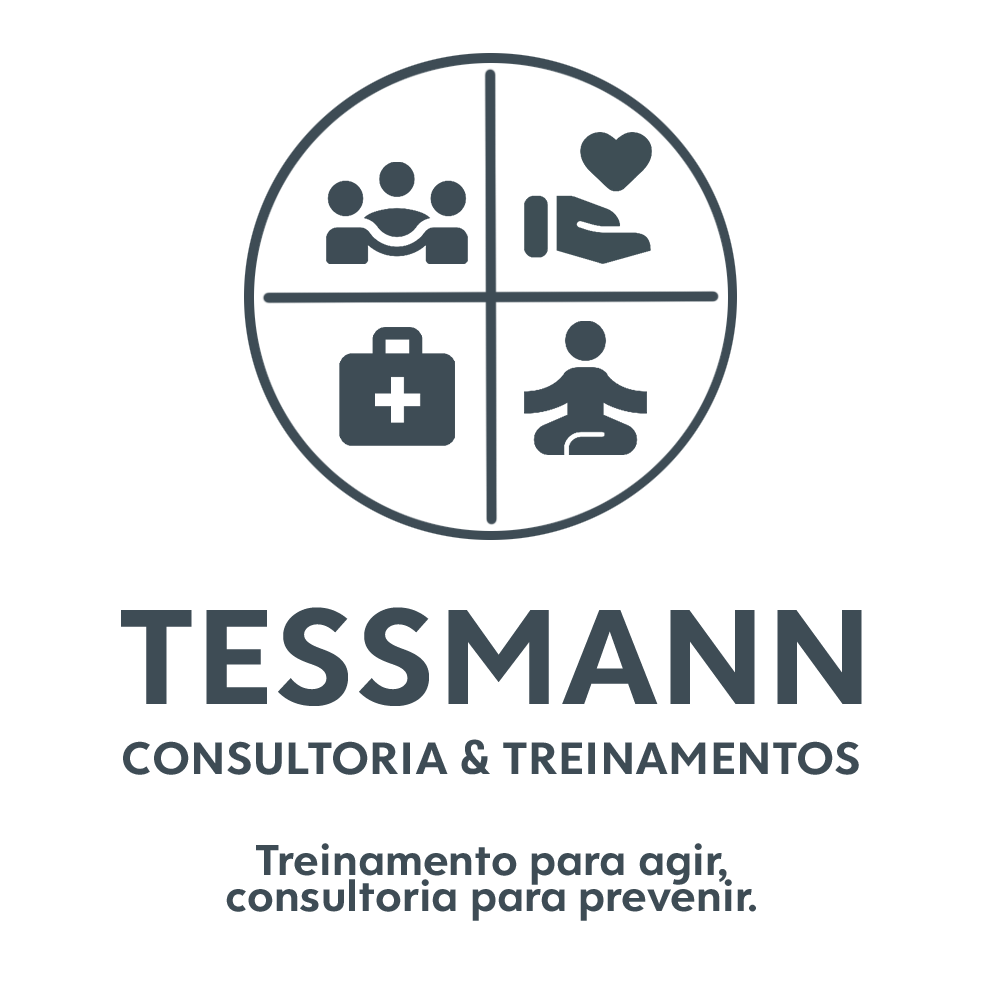
<style>
.page{position:relative;width:982px;height:981px;background:#ffffff}
.page>*{position:absolute;margin:0}
.t1{font:144px "FONTSPRINGDEMO-ClarikaProGeometricBold";color:#3e4c55}
.t2{font:48.1px "FONTSPRINGDEMO-ClarikaProGeometricBold";color:#3e4c55}
.t3{font:48.1px "Bahnschrift-Bold";color:#3e4c55}
.t4{font:45.9px/36px "FONTSPRINGDEMO-ClarikaProGeometricBold";color:#3e4c55}
</style>
<div class="page">
<p class="t1" style="left:121px;top:607px;width:741px;height:99px">TESSMANN</p>
<p class="t2" style="left:123px;top:739px;width:736px;height:36px">CONSULTORIA <span class="t3">&amp;</span> TREINAMENTOS</p>
<p class="t4" style="left:226px;top:843px;width:530px;height:78px;text-align:center">Treinamento para agir,<br>consultoria para prevenir.</p>
</div>
